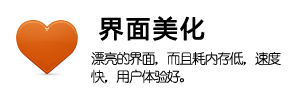
<style>
.page{position:relative;width:300px;height:100px;background:#ffffff}
.page>*{position:absolute;margin:0}
.t1{font:24px "MicrosoftYaHei";letter-spacing:0.1em;color:#000000;font-weight:bold}
.t2{font:14px/18px "YouYuan";letter-spacing:-0.1em;color:#000000}
</style>
<div class="page">
<p class="t1" style="left:99px;top:16px;width:106px;height:25px">界面美化</p>
<p class="t2" style="left:91px;top:51px;width:190px;height:33px">漂亮的界面，而且耗内存低，速度 快，用户体验好。</p>
</div>
